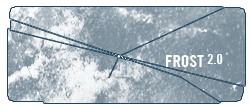
<style>
.page{position:relative;width:250px;height:110px}
.page>*{position:absolute;margin:0}
.t1{font:17px "TradeGothic-BoldCondTwenty";letter-spacing:-0.01em;color:#ffffff}
.t2{font:14px "TradeGothic-BoldCondTwenty";letter-spacing:-0.01em;color:#ffffff}
</style>
<div class="page">
<p class="t1" style="left:165px;top:54px;width:58px;height:13px">FROST <span class="t2">2.0</span></p>
</div>
